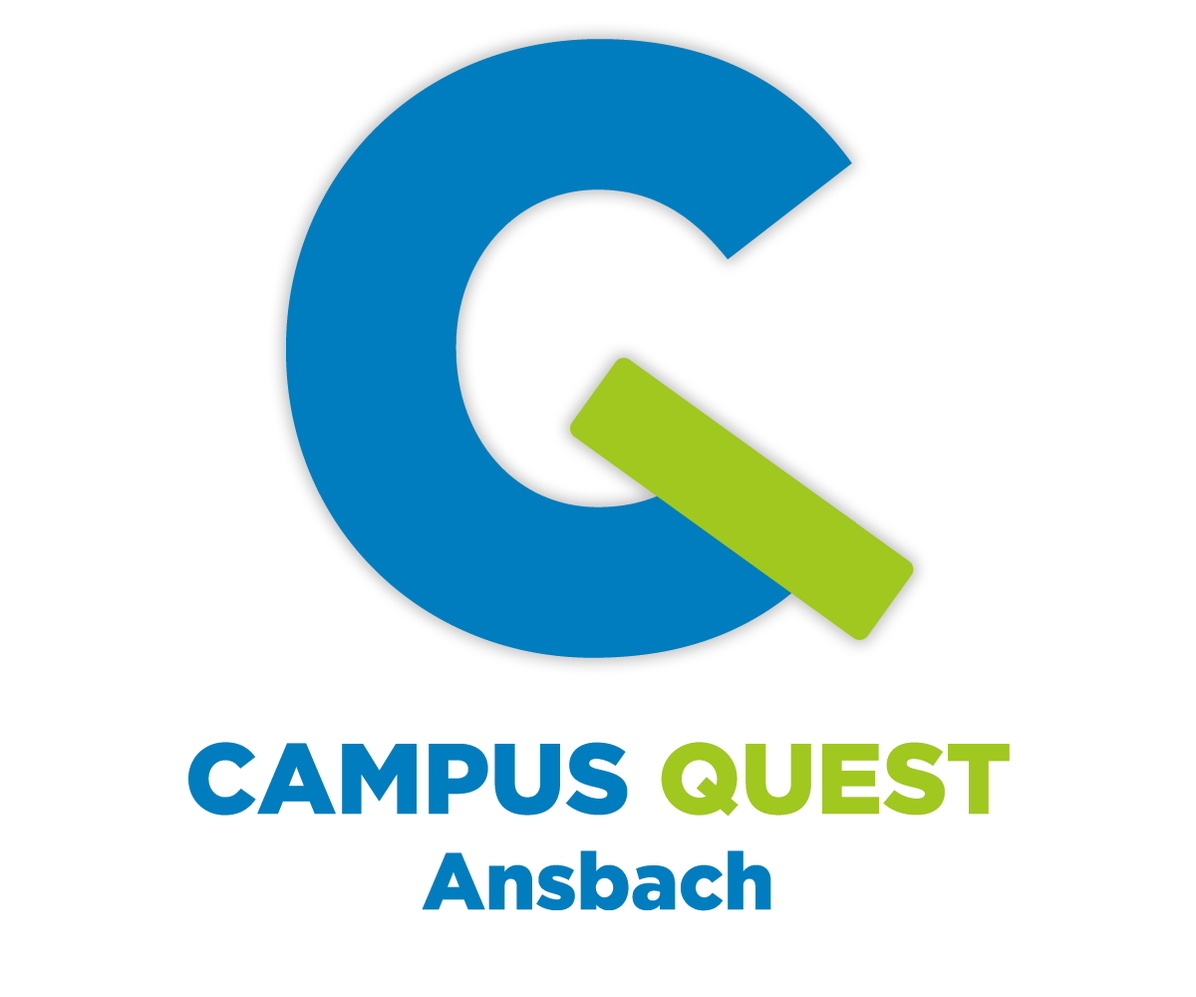
<style>
.page{position:relative;width:1196px;height:997px;background:#ffffff}
.page>*{position:absolute;margin:0}
.t1{font:849.4px "Gotham-Black";color:#007dbe}
.t2{font:79.7px "Gotham-Black";color:#007dbe}
.t3{font:99.7px "Gotham-Black";color:#007dbe}
.t4{font:99.7px "Gotham-Black";color:#a0c81e}
</style>
<div class="page">
<p class="t1" style="left:286px;top:39px;width:570px;height:619px">C</p>
<p class="t2" style="left:188px;top:742px;width:822px;height:169px;text-align:center"><span class="t3">CAMPUS </span><span class="t4">QUEST<br></span>Ansbach</p>
</div>
